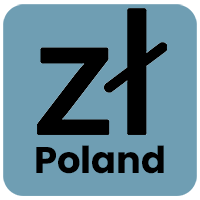
<style>
.page{position:relative;width:200px;height:200px;background:#6f9eb3}
.page>*{position:absolute;margin:0}
.t1{font:37px "Poppins-Bold";color:#000000}
</style>
<div class="page">
<p class="t1" style="left:36px;top:145px;width:128px;height:29px">Poland</p>
</div>
